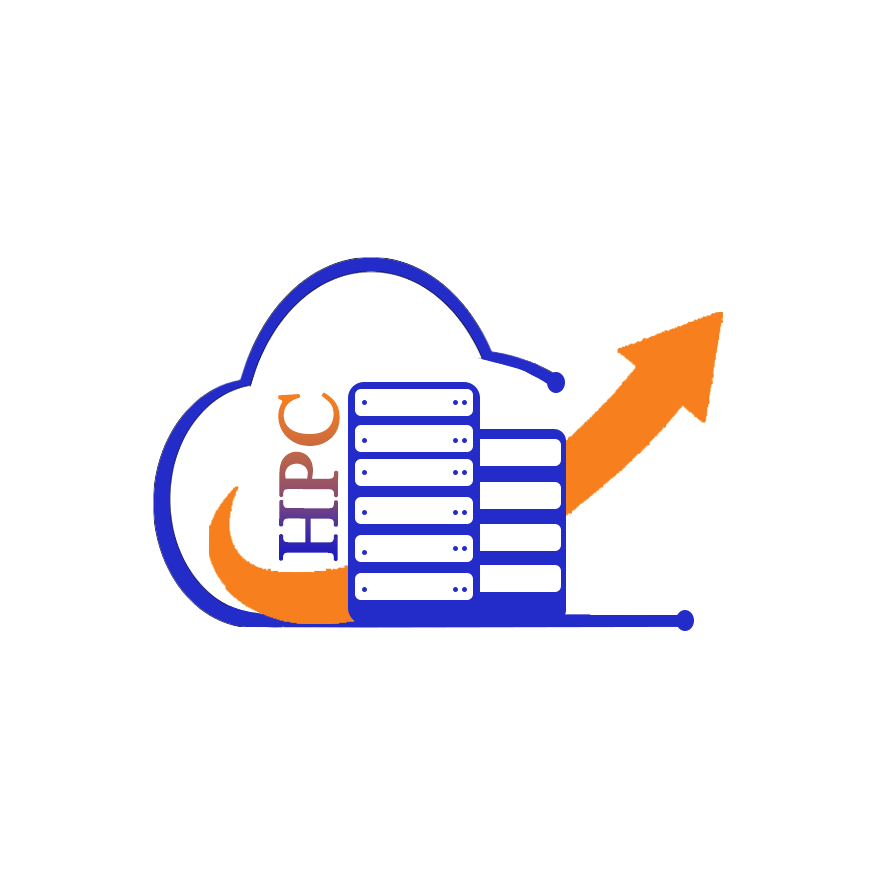
<style>
.page{position:relative;width:886px;height:886px;background:#ffffff}
.page>*{position:absolute;margin:0}
.t1{font:85px "MongolianBaiti";font-weight:bold}
</style>
<div class="page">
<p class="t1" style="left:278px;top:392px;width:62px;height:169px;rotate:-90deg">HPC</p>
</div>
